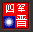
<style>
.page{position:relative;width:33px;height:32px;background:#f20000}
.page>*{position:absolute;margin:0}
.t1{font:10.4px "SimSun";color:#ffffff}
.t2{font:11.7px "SimSun";color:#ffffff}
</style>
<div class="page">
<p class="t1" style="left:6px;top:4px;width:19px;height:9px">四军</p>
<p class="t2" style="left:16px;top:15px;width:11px;height:12px">晋</p>
</div>
